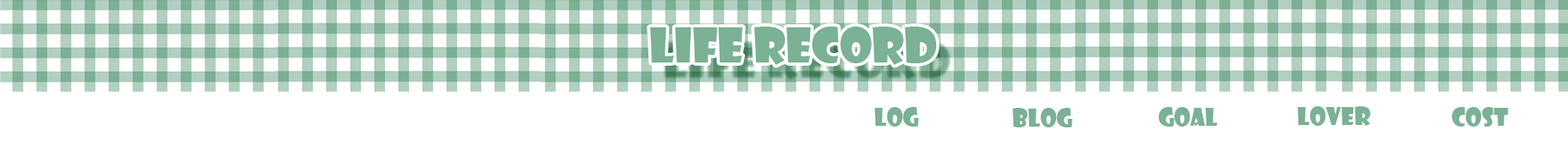
<style>
.page{position:relative;width:1568px;height:143px;background:#ffffff}
.page>*{position:absolute;margin:0}
.t1{font:47px "ShowcardGothic-Reg";color:#7bb194}
.t2{font:23.5px "ShowcardGothic-Reg";color:#7bb194}
</style>
<div class="page">
<p class="t1" style="left:650px;top:27px;width:287px;height:38px">LIfE RECORD</p>
<p class="t2" style="left:874px;top:107px;width:45px;height:20px">log</p>
<p class="t2" style="left:1012px;top:108px;width:61px;height:20px">blog</p>
<p class="t2" style="left:1159px;top:107px;width:59px;height:20px">goal</p>
<p class="t2" style="left:1298px;top:107px;width:72px;height:19px">lover</p>
<p class="t2" style="left:1452px;top:107px;width:56px;height:20px">cost</p>
</div>
